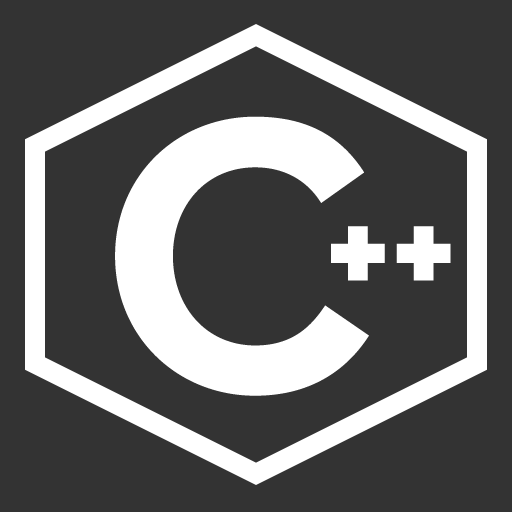
<style>
.page{position:relative;width:512px;height:512px;background:#333333}
.page>*{position:absolute;margin:0}
.t1{font:400px "NeutraText-Bold";color:#ffffff}
.t2{font:160px "NeutraText-Bold";color:#ffffff}
</style>
<div class="page">
<p class="t1" style="left:115px;top:116px;width:254px;height:280px">C</p>
<p class="t2" style="left:331px;top:226px;width:120px;height:55px">++</p>
</div>
